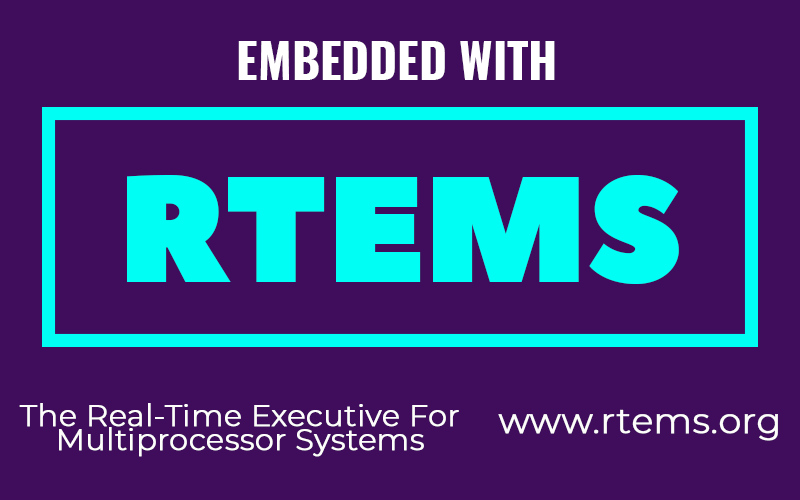
<style>
.page{position:relative;width:800px;height:500px;background:#400d5c}
.page>*{position:absolute;margin:0}
.t1{font:48px "Oswald-Bold";color:#ffffff}
.t2{font:150px "PeaceSans";color:#00fef5}
.t3{font:30px/24px "Montserrat-Light";color:#fdfdfc;font-weight:bold}
.t4{font:36px "Montserrat-Light";color:#fdfdfc;font-weight:bold}
</style>
<div class="page">
<p class="t1" style="left:238px;top:41px;width:317px;height:39px">EMBEDDED WITH</p>
<p class="t2" style="left:127px;top:175px;width:552px;height:109px">RTEMS</p>
<p class="t3" style="left:19px;top:403px;width:440px;height:54px;text-align:center">The Real-Time Executive For Multiprocessor Systems</p>
<p class="t4" style="left:498px;top:409px;width:280px;height:32px">www.rtems.org</p>
</div>
